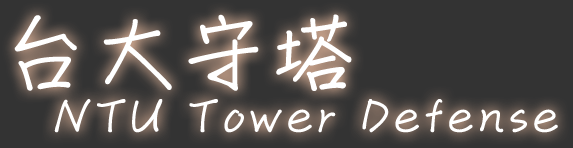
<style>
.page{position:relative;width:573px;height:148px;background:#333333}
.page>*{position:absolute;margin:0}
.t1{font:83.3px "DFChu-W4-WINP-BF";letter-spacing:0.05em;color:#ffffff;font-weight:bold}
.t2{font:50px "DFChu-W4-WINP-BF";letter-spacing:0.05em;color:#ffffff;font-weight:bold}
</style>
<div class="page">
<p class="t1" style="left:14px;top:14px;width:338px;height:77px">台大守塔</p>
<p class="t2" style="left:54px;top:99px;width:504px;height:34px">NTU Tower Defense</p>
</div>
